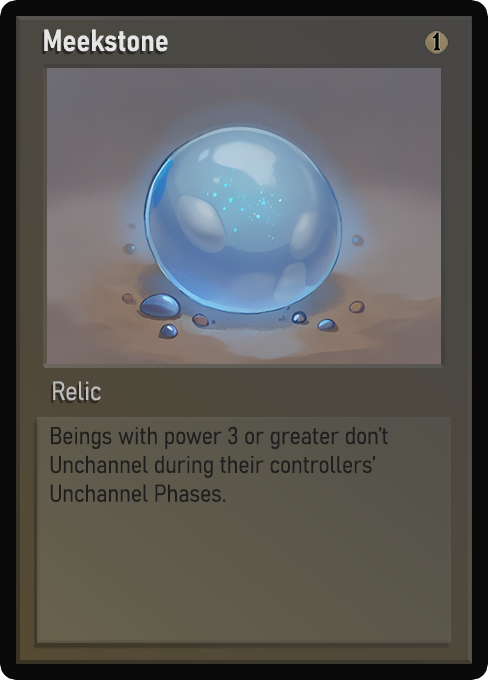
<style>
.page{position:relative;width:488px;height:680px}
.page>*{position:absolute;margin:0}
.t1{font:30px "Bahnschrift-SemiBoldSemiCondensed";color:#f2f2f2;font-weight:bold}
.t2{font:25px "WTRRoycroft";color:#000000;font-weight:bold;scale:1.09 1}
.t3{font:26px "Bahnschrift-LightSemiCondensed";color:#c8c8c8;font-weight:bold}
.t4{font:24px "Bahnschrift-LightSemiCondensed";color:#1e1e1e;font-weight:bold}
</style>
<div class="page">
<p class="t1" style="left:44px;top:29px;width:124px;height:23px;opacity:0.9">Meekstone</p>
<p class="t2" style="left:432px;top:32px;width:9px;height:19px">1</p>
<p class="t3" style="left:53px;top:381px;width:48px;height:20px;opacity:0.9">Relic</p>
<p class="t4" style="left:50px;top:426px;width:338px;height:76px">Beings with power 3 or greater don’t Unchannel during their controllers’ Unchannel Phases.</p>
</div>
